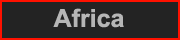
<style>
.page{position:relative;width:180px;height:40px;background:#232323}
.page>*{position:absolute;margin:0}
.t1{font:25px "Arial-BoldMT";color:#b6b6b6}
</style>
<div class="page">
<p class="t1" style="left:53px;top:8px;width:71px;height:20px">Africa</p>
</div>
